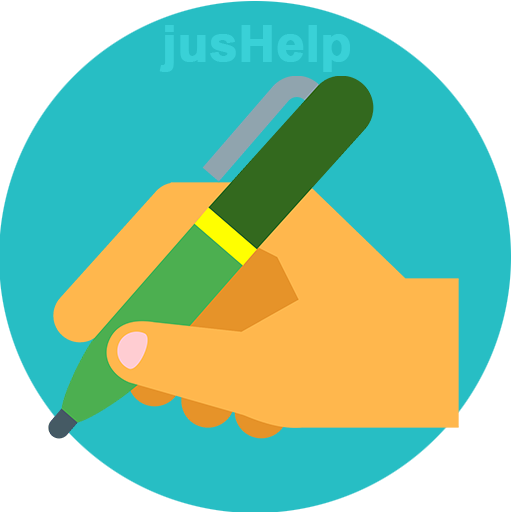
<style>
.page{position:relative;width:512px;height:512px;background:#27bec4}
.page>*{position:absolute;margin:0}
.t1{font:50px "Arial-BoldMT";color:#3ad2d8;font-weight:bold}
</style>
<div class="page">
<p class="t1" style="left:159px;top:25px;width:191px;height:47px">jusHelp</p>
</div>
